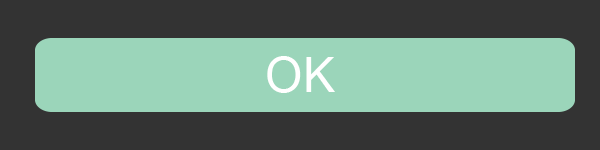
<style>
.page{position:relative;width:600px;height:150px;background:#333333}
.page>*{position:absolute;margin:0}
.t1{font:48px "ArialMT";color:#ffffff}
</style>
<div class="page">
<p class="t1" style="left:267px;top:56px;width:68px;height:37px">OK</p>
</div>
